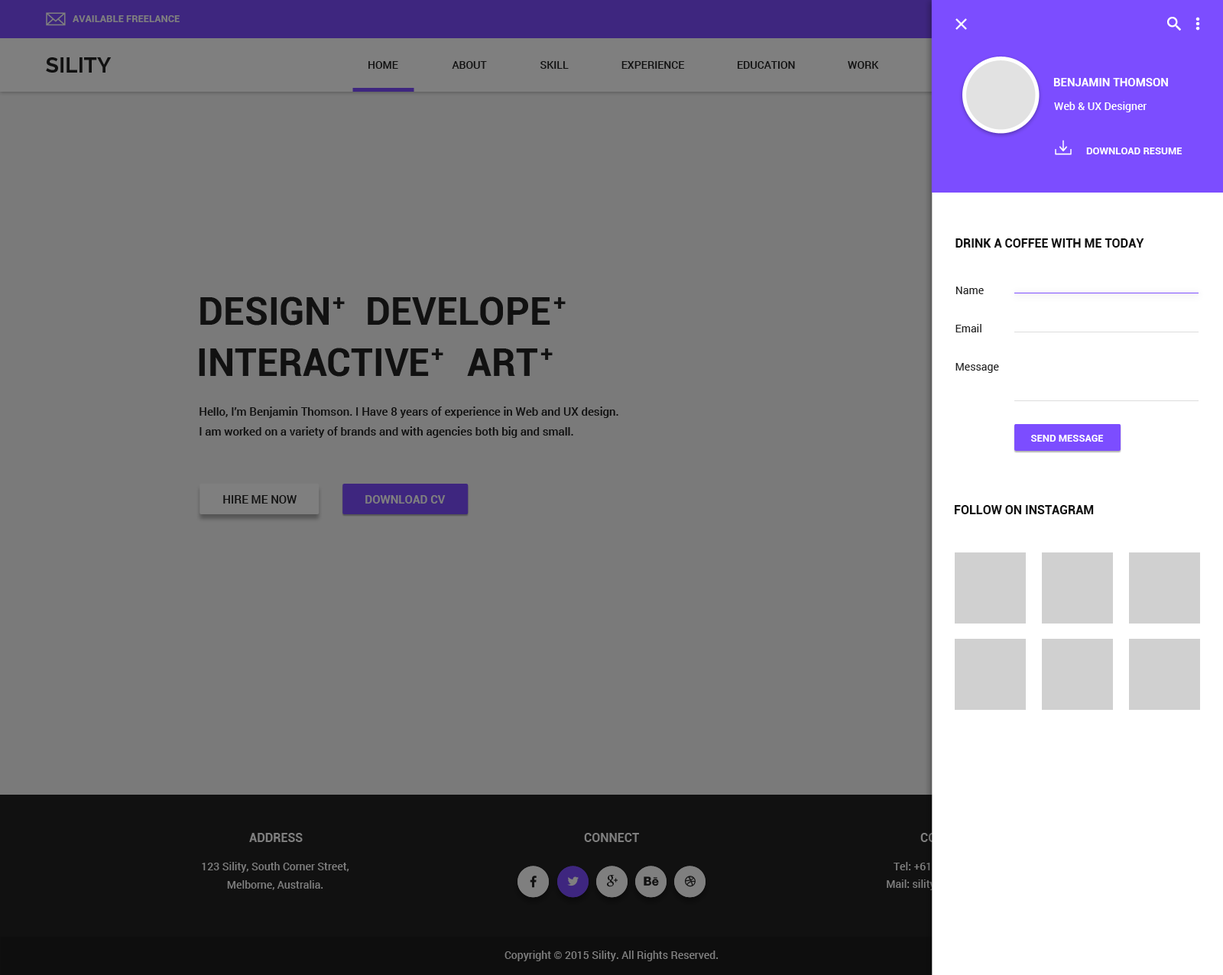
<style>
.page{position:relative;width:1223px;height:975px;background:#7a7a7a}
.page>*{position:absolute;margin:0}
.t1{font:9.9px "Roboto-Bold";color:#7f7f7f;text-transform:uppercase}
.t2{font:21.4px "Raleway-Bold";color:#232323}
.t3{font:10.7px "Roboto-Medium";color:#232323;text-transform:uppercase}
.t4{font:11.5px "Roboto-Bold";color:#ffffff;text-transform:uppercase}
.t5{font:10.7px "Roboto-Medium";color:#ffffff}
.t6{font:9.9px "Roboto-Bold";color:#ffffff}
.t7{font:12.2px "Roboto-Bold";color:#111111;text-transform:uppercase}
.t8{font:10.7px "Roboto-Regular";color:#232323}
.t9{font:38.2px "Roboto-Bold";color:#232323;text-transform:uppercase}
.t10{font:22.9px "Roboto-Bold";color:#232323;text-transform:uppercase}
.t11{font:11.5px/19.9px "Roboto-Medium";color:#232323}
.t12{font:11.5px "Roboto-Medium";color:#232323}
.t13{font:11.5px "Roboto-Bold";color:#7f7f7f}
.t14{font:12.2px "Roboto-Bold";color:#7f7f7f;text-transform:uppercase}
.t15{font:10.7px/18.3px "Roboto-Medium";color:#7f7f7f}
.t16{font:10.7px "Roboto-Medium";color:#7f7f7f}
</style>
<div class="page">
<p class="t1" style="left:73px;top:15px;width:107px;height:7px">available freelance</p>
<p class="t2" style="left:46px;top:57px;width:66px;height:16px">SILITY</p>
<p class="t3" style="left:368px;top:61px;width:30px;height:8px">home</p>
<p class="t3" style="left:452px;top:61px;width:35px;height:8px">about</p>
<p class="t3" style="left:540px;top:61px;width:29px;height:8px">skill</p>
<p class="t3" style="left:621px;top:61px;width:64px;height:8px">experience</p>
<p class="t3" style="left:737px;top:61px;width:58px;height:8px">education</p>
<p class="t3" style="left:848px;top:61px;width:31px;height:8px">work</p>
<p class="t4" style="left:1053px;top:78px;width:115px;height:8px">Benjamin thomson</p>
<p class="t5" style="left:1054px;top:102px;width:92px;height:10px">Web &amp; UX Designer</p>
<p class="t6" style="left:1086px;top:147px;width:96px;height:7px">DOWNLOAD RESUME</p>
<p class="t7" style="left:955px;top:238px;width:189px;height:10px">drink a coffee with me today</p>
<p class="t8" style="left:955px;top:287px;width:29px;height:7px">Name</p>
<p class="t9" style="left:200px;top:297px;width:129px;height:29px">design</p>
<p class="t10" style="left:332px;top:297px;width:13px;height:12px">+</p>
<p class="t9" style="left:368px;top:297px;width:182px;height:29px">developE</p>
<p class="t10" style="left:553px;top:297px;width:13px;height:12px">+</p>
<p class="t8" style="left:955px;top:324px;width:26px;height:8px">Email</p>
<p class="t9" style="left:199px;top:348px;width:230px;height:29px">interactive</p>
<p class="t10" style="left:431px;top:348px;width:12px;height:12px">+</p>
<p class="t9" style="left:467px;top:348px;width:70px;height:28px">ART</p>
<p class="t10" style="left:540px;top:348px;width:13px;height:12px">+</p>
<p class="t8" style="left:955px;top:363px;width:44px;height:10px">Message</p>
<p class="t11" style="left:199px;top:407px;width:419px;height:31px">Hello, I’m Benjamin Thomson. I Have 8 years of experience in Web and UX design.<br>I am worked on a variety of brands and with agencies both big and small.</p>
<p class="t6" style="left:1031px;top:435px;width:73px;height:7px">SEND MESSAGE</p>
<p class="t12" style="left:223px;top:495px;width:74px;height:9px">HIRE ME NOW</p>
<p class="t13" style="left:365px;top:495px;width:81px;height:9px">DOWNLOAD CV</p>
<p class="t7" style="left:955px;top:505px;width:139px;height:9px">follow on instagram</p>
<p class="t14" style="left:249px;top:833px;width:54px;height:9px">Address</p>
<p class="t14" style="left:584px;top:833px;width:55px;height:9px">connect</p>
<p class="t15" style="left:202px;top:862px;width:147px;height:28px;text-align:center">123 Sility, South Corner Street,<br>Melborne, Australia.</p>
<p class="t16" style="left:504px;top:951px;width:214px;height:10px">Copyright © 2015 Sility. All Rights Reserved.</p>
</div>
